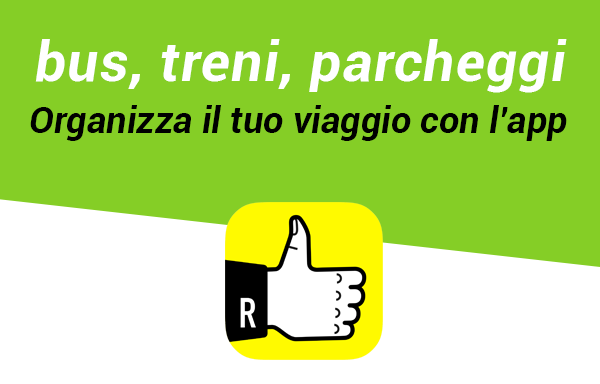
<style>
.page{position:relative;width:600px;height:384px;background:#85ce26}
.page>*{position:absolute;margin:0}
.t1{font:55px "Roboto-BoldItalic";letter-spacing:0.025em;color:#ffffff}
.t2{font:36.2px "Roboto-BoldItalic";color:#000000}
</style>
<div class="page">
<p class="t1" style="left:35px;top:39px;width:532px;height:54px">bus, treni, parcheggi</p>
<p class="t2" style="left:30px;top:105px;width:537px;height:36px">Organizza il tuo viaggio con l’app</p>
</div>
